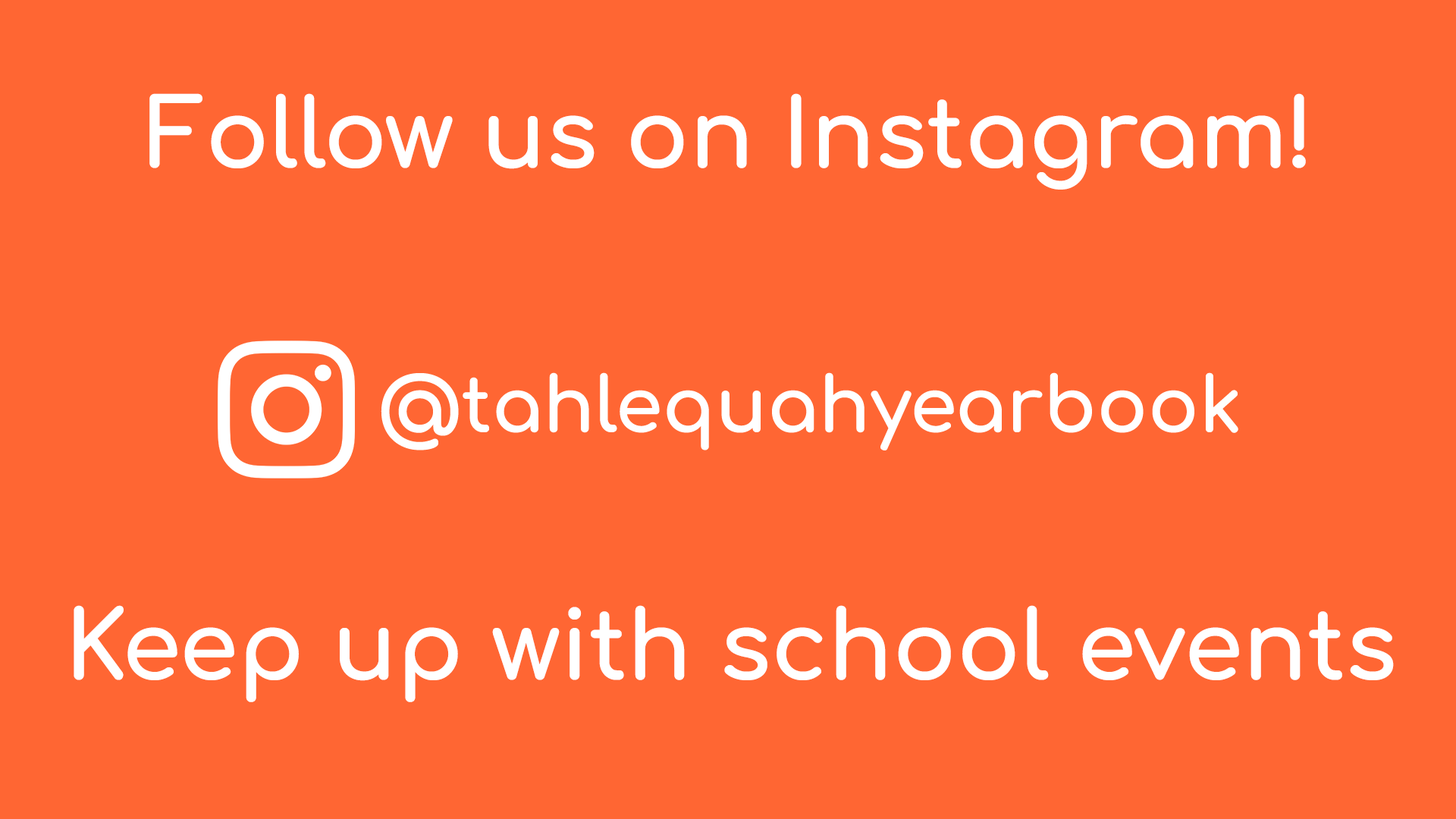
<style>
.page{position:relative;width:1456px;height:819px;background:#ff6633}
.page>*{position:absolute;margin:0}
.t1{font:94.8px/511.9px "Comfortaa-Bold";color:#ffffff}
.t2{font:94.8px "Comfortaa-Bold";color:#ffffff}
</style>
<div class="page">
<p class="t1" style="left:74px;top:93px;width:1320px;height:609px;text-align:center"><span class="t2">Follow us on Instagram!<br></span>Keep up with school events</p>
</div>
